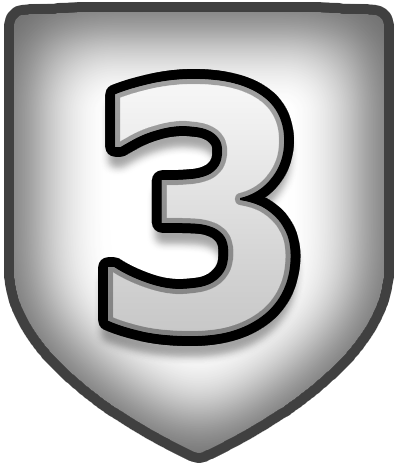
<style>
.page{position:relative;width:398px;height:470px}
.page>*{position:absolute;margin:0}
.t1{font:338.2px "Tahoma-Bold";letter-spacing:0.16em}
</style>
<div class="page">
<p class="t1" style="left:108px;top:79px;width:183px;height:257px">3</p>
</div>
